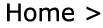
<style>
.page{position:relative;width:103px;height:28px;background:#ffffff}
.page>*{position:absolute;margin:0}
.t1{font:24px "Verdana";color:#000000}
</style>
<div class="page">
<p class="t1" style="left:7px;top:3px;width:94px;height:19px">Home &gt;</p>
</div>
